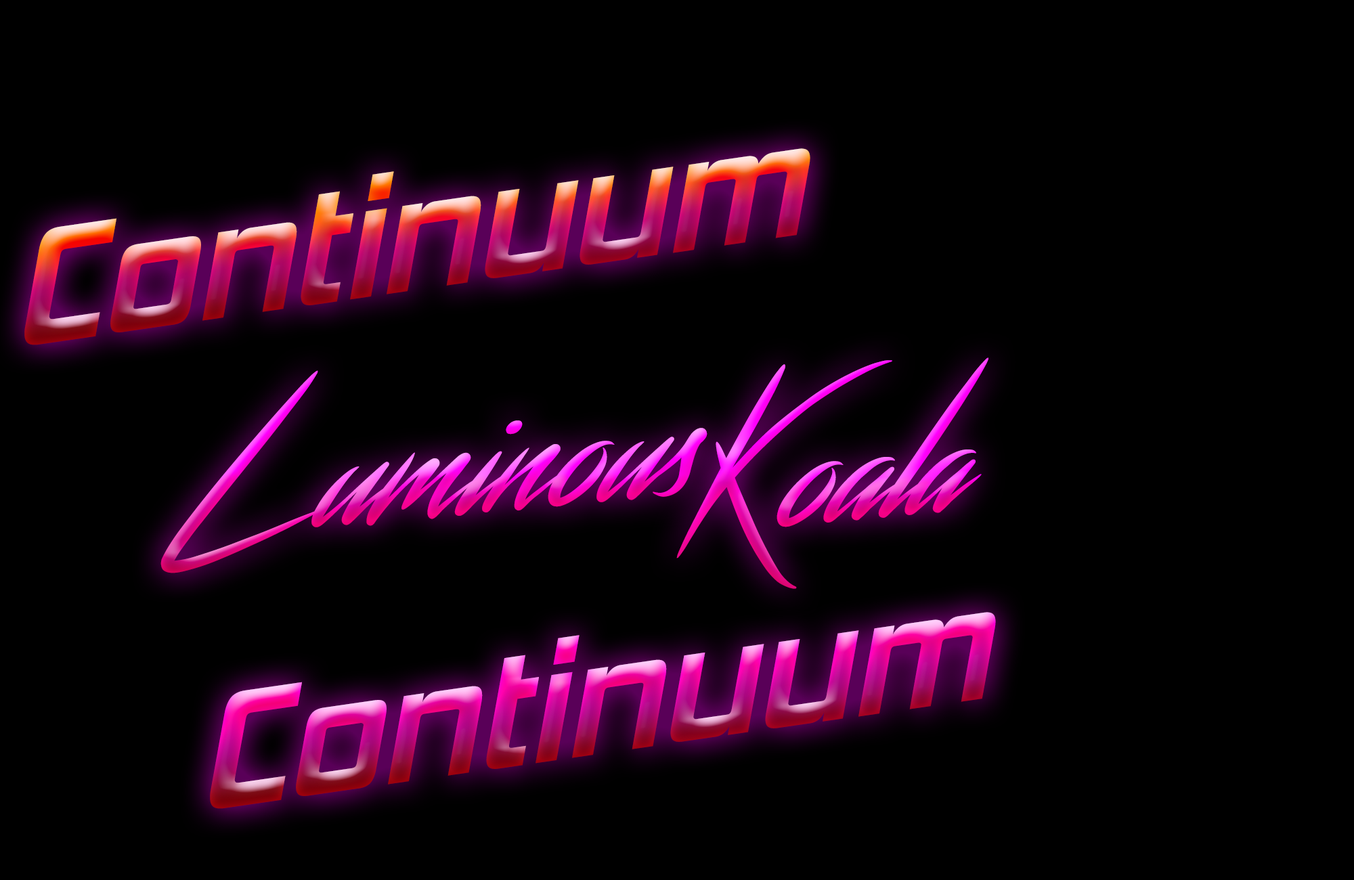
<style>
.page{position:relative;width:1354px;height:880px;background:#000000}
.page>*{position:absolute;margin:0}
.t1{font:169.3px "HemiHeadRg-BoldItalic";scale:0.89 1}
.t2{font:169.3px "Streamster"}
</style>
<div class="page">
<p class="t1" style="left:24px;top:148px;width:787px;height:197px;rotate:-8deg">Continuum</p>
<p class="t2" style="left:677px;top:358px;width:312px;height:231px;rotate:-5deg">Koala</p>
<p class="t2" style="left:161px;top:370px;width:547px;height:204px;rotate:-5deg">Luminous</p>
<p class="t1" style="left:210px;top:612px;width:786px;height:197px;rotate:-8deg">Continuum</p>
</div>
